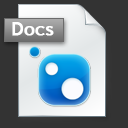
<style>
.page{position:relative;width:128px;height:128px;background:#333333}
.page>*{position:absolute;margin:0}
.t1{font:18px "TrebuchetMS";color:#ffffff;font-weight:bold;scale:1.1 1}
</style>
<div class="page">
<p class="t1" style="left:12px;top:22px;width:42px;height:14px">Docs</p>
</div>
